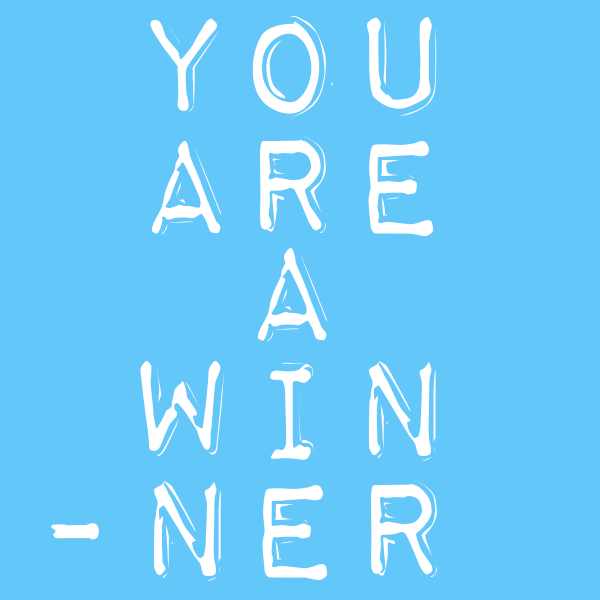
<style>
.page{position:relative;width:600px;height:600px;background:#63c7f9}
.page>*{position:absolute;margin:0}
.t1{font:180.6px "ImpactLabelReversed";color:#ffffff}
</style>
<div class="page">
<p class="t1" style="left:150px;top:16px;width:287px;height:103px">you</p>
<p class="t1" style="left:151px;top:136px;width:283px;height:100px">ARE</p>
<p class="t1" style="left:257px;top:247px;width:71px;height:95px">A</p>
<p class="t1" style="left:140px;top:361px;width:296px;height:100px">WIN</p>
<p class="t1" style="left:51px;top:480px;width:386px;height:101px">-nER</p>
</div>
